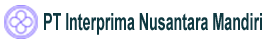
<style>
.page{position:relative;width:264px;height:42px;background:#ffffff}
.page>*{position:absolute;margin:0}
.t1{font:23.5px "Arial-BoldMT";color:#0e3840;scale:0.61 1}
</style>
<div class="page">
<p class="t1" style="left:44px;top:13px;width:218px;height:22px">PT Interprima Nusantara Mandiri</p>
</div>
